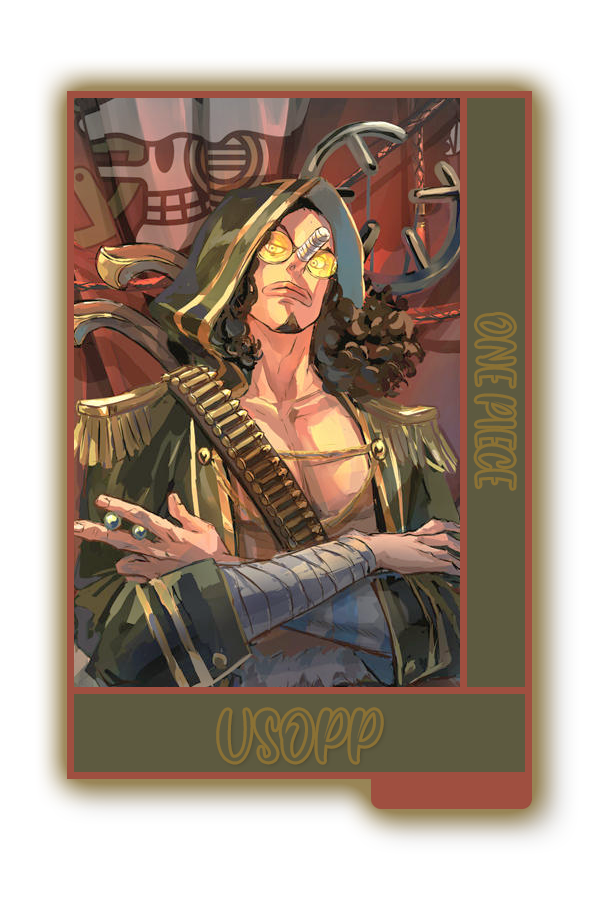
<style>
.page{position:relative;width:600px;height:900px;background:#ffffff}
.page>*{position:absolute;margin:0}
.t1{font:54.2px "FloridaOrangePersonalUse";color:#4b4837}
.t2{font:75px "FloridaOrangePersonalUse";color:#4b4837}
</style>
<div class="page">
<p class="t1" style="left:476px;top:315px;width:38px;height:173px;rotate:90deg">ONE PIECE</p>
<p class="t2" style="left:219px;top:710px;width:162px;height:52px">USOPP</p>
</div>
